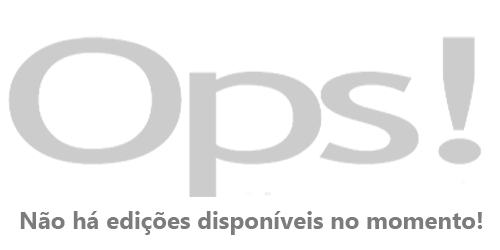
<style>
.page{position:relative;width:500px;height:250px;background:#ffffff}
.page>*{position:absolute;margin:0}
.t1{font:24px "NirmalaUI-Bold";color:#7c7c7c}
</style>
<div class="page">
<p class="t1" style="left:20px;top:211px;width:463px;height:24px">Não há edições disponíveis no momento!</p>
</div>
